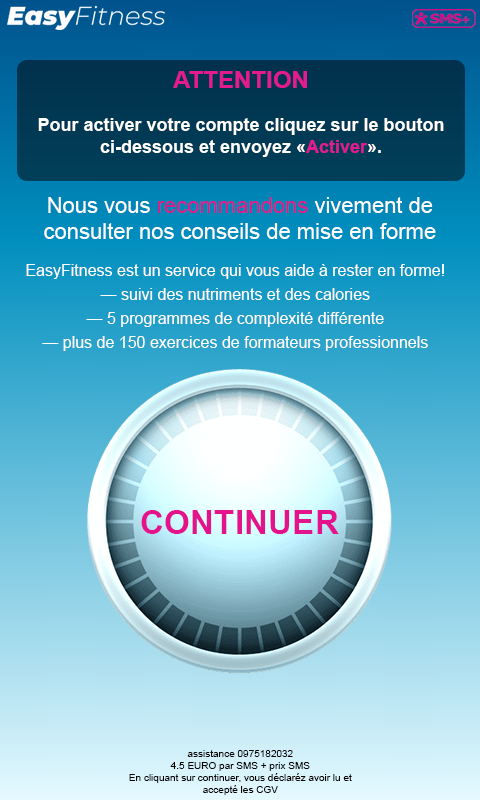
<style>
.page{position:relative;width:480px;height:800px}
.page>*{position:absolute;margin:0}
.t1{font:18px "Arial-BoldMT";color:#ffffff}
.t2{font:24px "Arial-BoldMT";color:#e31b8e}
.t3{font:18px "Arial-BoldMT";color:#e31b8e}
.t4{font:22px "ArialMT";color:#ffffff}
.t5{font:22px "ArialMT";color:#d61d89}
.t6{font:16px/12px "ArialMT";color:#ffffff}
.t7{font:33.3px "Arial-BoldMT";color:#e4128b}
.t8{font:10px/6px "ArialMT";color:#000000}
</style>
<div class="page">
<p class="t1" style="left:38px;top:71px;width:406px;height:86px;text-align:center"><span class="t2">ATTENTION<br></span><br>Pour activer votre compte cliquez sur le bouton<br>ci-dessous et envoyez «<span class="t3">Activer</span>».</p>
<p class="t4" style="left:44px;top:197px;width:392px;height:42px;text-align:center">Nous vous <span class="t5">recommandons</span> vivement de<br>consulter nos conseils de mise en forme</p>
<p class="t6" style="left:26px;top:264px;width:418px;height:87px;text-align:center">EasyFitness est un service qui vous aide à rester en forme!<br><br>— suivi des nutriments et des calories<br><br>— 5 programmes de complexité différente<br><br>— plus de 150 exercices de formateurs professionnels</p>
<p class="t7" style="left:141px;top:510px;width:198px;height:24px">CONTINUER</p>
<p class="t8" style="left:129px;top:750px;width:223px;height:45px;text-align:center">assistance 0975182032<br><br>4.5 EURO par SMS + prix SMS<br><br>En cliquant sur continuer, vous déclaréz avoir lu et<br><br>accepté les CGV</p>
</div>
